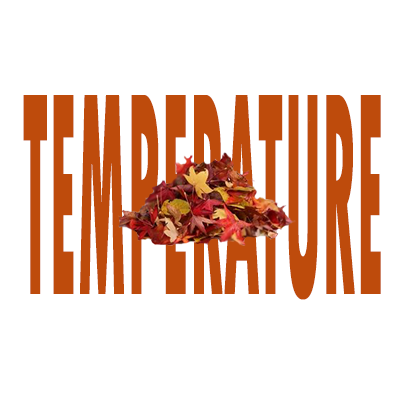
<style>
.page{position:relative;width:400px;height:400px;background:#ffffff}
.page>*{position:absolute;margin:0}
.t1{font:305.2px "TwCenMT-CondensedExtraBold";color:#be4b0c;scale:0.22 1}
</style>
<div class="page">
<p class="t1" style="left:23px;top:95px;width:358px;height:205px">TEMPERATURE</p>
</div>
